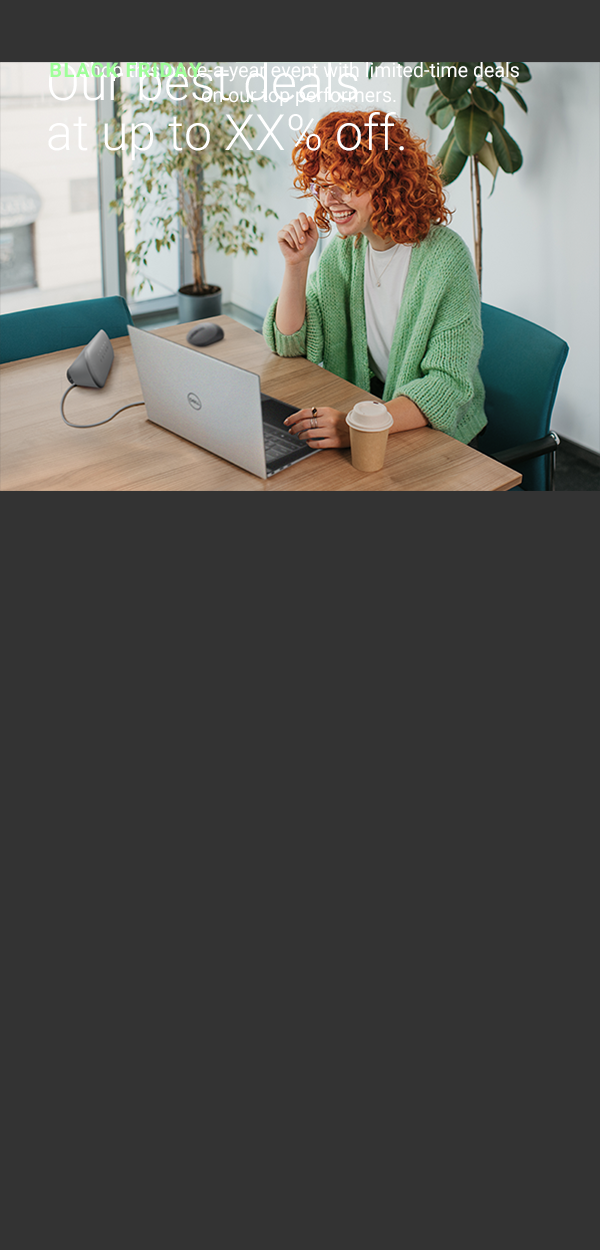
<style>
.page{position:relative;width:600px;height:1250px;background:#333333}
.page>*{position:absolute;margin:0}
.t1{font:50px/50px "Roboto-Light";color:#ffffff}
.t2{font:20px "Roboto-Bold";letter-spacing:0.04em;color:#9fff99;text-transform:uppercase}
.t3{font:20px/25px "Roboto-Regular";color:#ffffff}
</style>
<div class="page">
<p class="t1" style="left:48px;top:62px;width:356px;height:99px">Our best deals <br>at up to XX% off.</p>
<p class="t2" style="left:50px;top:62px;width:152px;height:16px">BLACK FRIDAY</p>
<p class="t3" style="left:79px;top:62px;width:440px;height:44px;text-align:center">Shop this once-a-year event with limited-time deals<br>on our top performers.</p>
</div>
